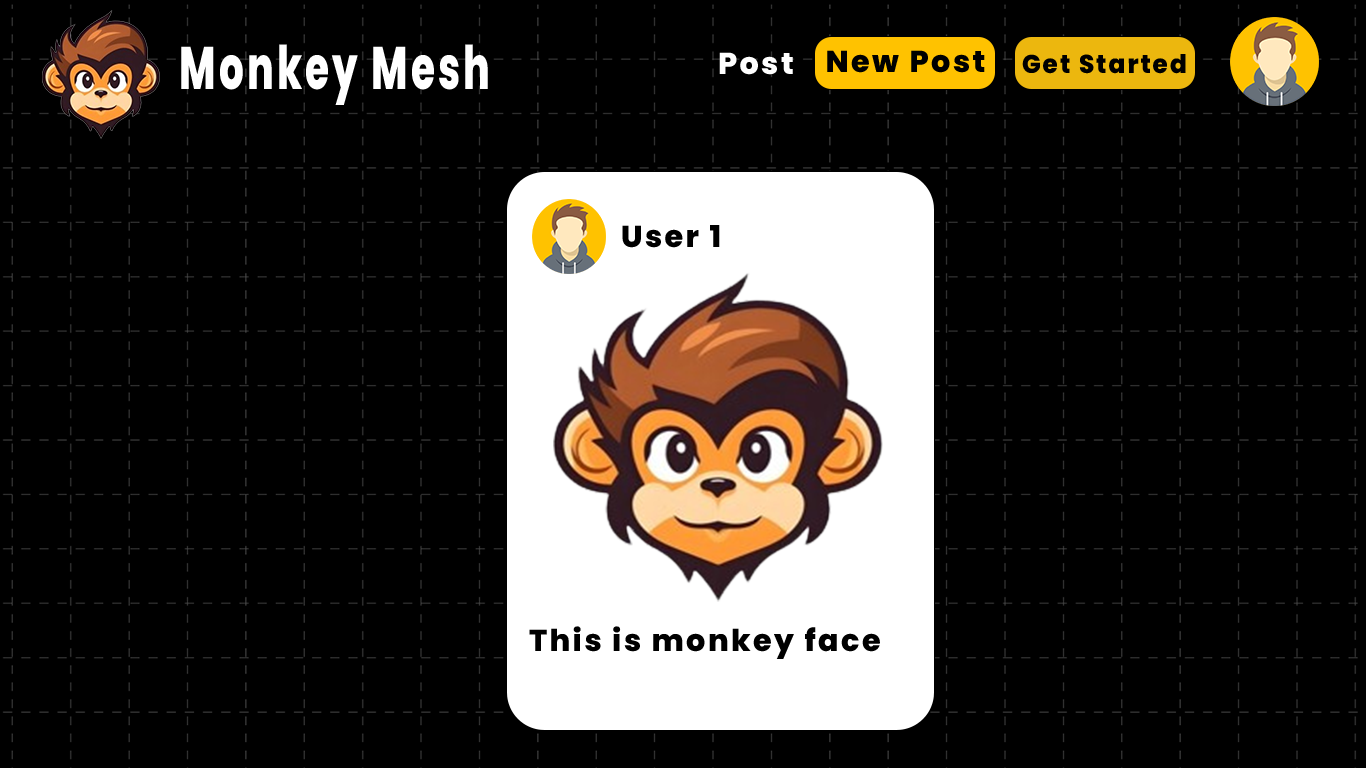
<style>
.page{position:relative;width:1366px;height:768px;background:#000000}
.page>*{position:absolute;margin:0}
.t1{font:60px "Poppins-ExtraBold";letter-spacing:0.08em;color:#ffffff;scale:0.65 1}
.t2{font:30.2px "Poppins-ExtraBold";letter-spacing:0.08em;color:#ffffff}
.t3{font:30.2px "Poppins-ExtraBold";letter-spacing:0.08em;color:#000000}
.t4{font:25.7px "Poppins-ExtraBold";letter-spacing:0.08em;color:#000000;scale:0.96 1}
</style>
<div class="page">
<p class="t1" style="left:181px;top:44px;width:307px;height:61px">Monkey Mesh</p>
<p class="t2" style="left:719px;top:52px;width:74px;height:23px">Post</p>
<p class="t3" style="left:827px;top:50px;width:158px;height:23px">New Post</p>
<p class="t4" style="left:1022px;top:54px;width:164px;height:20px">Get Started</p>
<p class="t3" style="left:622px;top:225px;width:98px;height:23px">User 1</p>
<p class="t3" style="left:529px;top:626px;width:351px;height:33px">This is monkey face</p>
</div>
